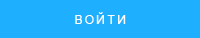
<style>
.page{position:relative;width:200px;height:38px;background:#1eb0ff}
.page>*{position:absolute;margin:0}
.t1{font:12px "ArialMT";letter-spacing:0.2em;color:#ffffff;text-transform:uppercase}
</style>
<div class="page">
<p class="t1" style="left:75px;top:12px;width:51px;height:12px">ВОЙТИ</p>
</div>
